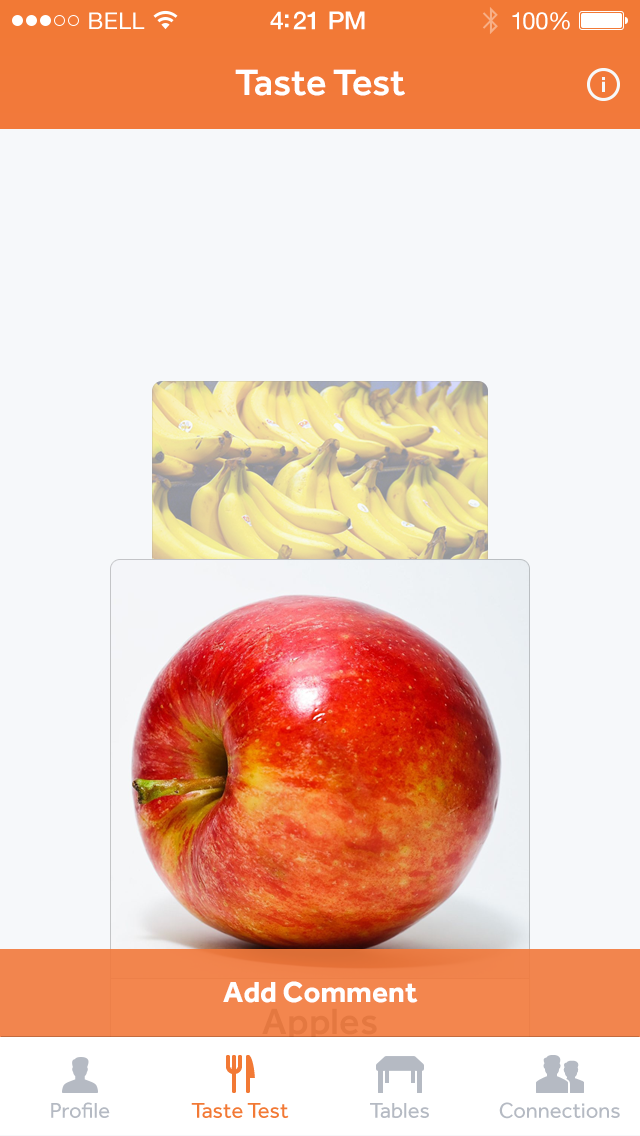
<style>
.page{position:relative;width:640px;height:1136px;background:#f6f8fa}
.page>*{position:absolute;margin:0}
.t1{font:23px "HelveticaNeue";letter-spacing:0.02em;color:#ffffff}
.t2{font:25px "HelveticaNeue-Medium";letter-spacing:-0.02em;color:#ffffff}
.t3{font:24px "HelveticaNeue";letter-spacing:-0.02em;color:#ffffff}
.t4{font:38px "Effra-Medium";color:#ffffff}
.t5{font:30px "Effra-Bold";color:#ffffff}
.t6{font:38px "Effra-Medium";color:#e47840}
.t7{font:22px "Effra-Regular";color:#b5bac3}
.t8{font:22px "Effra-Regular";color:#f27935}
</style>
<div class="page">
<p class="t1" style="left:89px;top:12px;width:56px;height:17px">BELL</p>
<p class="t2" style="left:270px;top:11px;width:95px;height:19px">4:21 PM</p>
<p class="t3" style="left:512px;top:12px;width:58px;height:18px">100%</p>
<p class="t4" style="left:235px;top:69px;width:170px;height:27px">Taste Test</p>
<p class="t5" style="left:223px;top:981px;width:195px;height:22px">Add Comment</p>
<p class="t6" style="left:262px;top:1008px;width:115px;height:34px">Apples</p>
<p class="t7" style="left:51px;top:1102px;width:59px;height:16px">Profile</p>
<p class="t8" style="left:191px;top:1103px;width:98px;height:15px">Taste Test</p>
<p class="t7" style="left:370px;top:1103px;width:59px;height:15px">Tables</p>
<p class="t7" style="left:499px;top:1102px;width:121px;height:17px">Connections</p>
</div>
